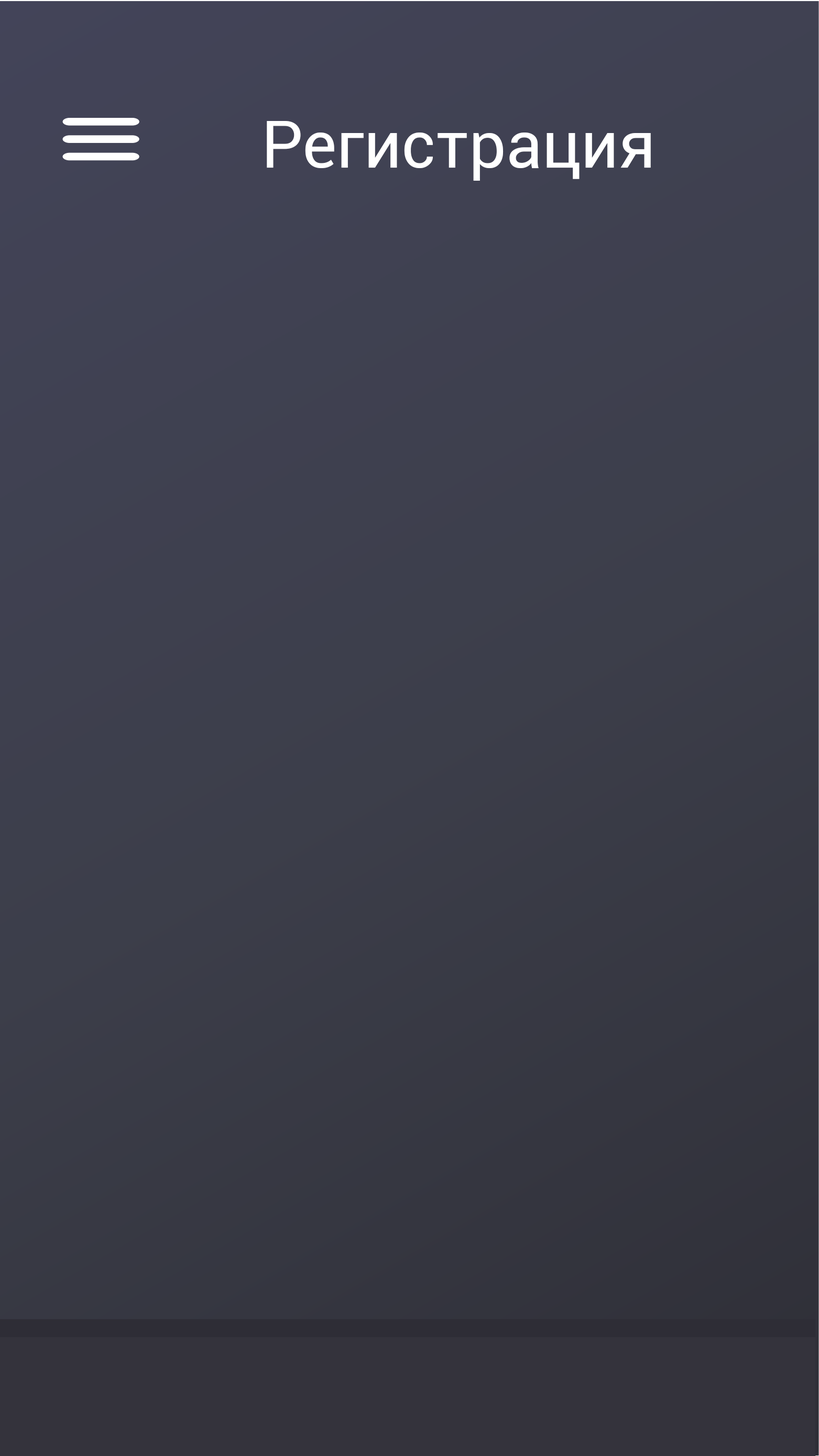
<style>
.page{position:relative;width:819px;height:1456px}
.page>*{position:absolute;margin:0}
.t1{font:65.5px "Roboto-Regular";color:#ffffff}
</style>
<div class="page">
<p class="t1" style="left:267px;top:121px;width:384px;height:60px">Регистрация</p>
</div>
